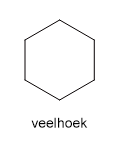
<style>
.page{position:relative;width:120px;height:144px;background:#ffffff}
.page>*{position:absolute;margin:0}
.t1{font:13.9px "ArialMT";color:#000000}
</style>
<div class="page">
<p class="t1" style="left:31px;top:117px;width:57px;height:11px">veelhoek</p>
</div>
